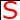
<style>
.page{position:relative;width:20px;height:20px;background:#ffffff}
.page>*{position:absolute;margin:0}
.t1{font:24px "Verdana";color:#ff0000}
</style>
<div class="page">
<p class="t1" style="left:3px;top:1px;width:14px;height:18px">S</p>
</div>
